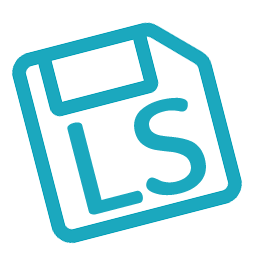
<style>
.page{position:relative;width:256px;height:256px;background:#ffffff}
.page>*{position:absolute;margin:0}
.t1{font:128px "Dosis-SemiBold";color:#1ba8be;scale:1.1 1}
</style>
<div class="page">
<p class="t1" style="left:67px;top:97px;width:139px;height:118px;rotate:-15deg">LS</p>
</div>
